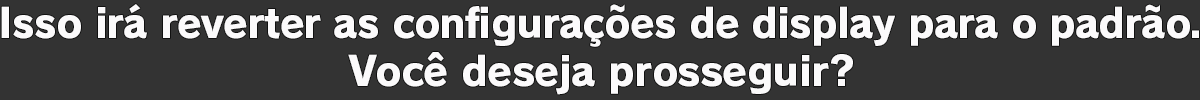
<style>
.page{position:relative;width:1200px;height:100px;background:#333333}
.page>*{position:absolute;margin:0}
.t1{font:40px "RodinPro-EB";letter-spacing:-0.019em;color:#fbfafb}
.t2{font:40px "RodinPro-EB";letter-spacing:-0.015em;color:#fbfafb}
</style>
<div class="page">
<p class="t1" style="left:1px;top:4px;width:1198px;height:43px">Isso irá reverter as configurações de display para o padrão.</p>
<p class="t2" style="left:348px;top:52px;width:505px;height:43px">Você deseja prosseguir?</p>
</div>
